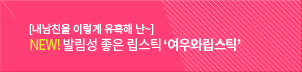
<style>
.page{position:relative;width:302px;height:72px;background:#ff3e75}
.page>*{position:absolute;margin:0}
.t1{font:11px "NotoSansCJKkr-Medium";letter-spacing:-0.05em;color:#ffffff}
.t2{font:14px "NotoSansCJKkr-Regular";letter-spacing:-0.05em;color:#ffffff;scale:0.95 1}
.t3{font:14px "NotoSansCJKkr-Regular";letter-spacing:-0.05em;color:#e3f42a;scale:0.95 1}
.t4{font:14px "NotoSansCJKkr-Bold";letter-spacing:-0.05em;color:#ffffff;scale:0.95 1}
</style>
<div class="page">
<p class="t1" style="left:29px;top:23px;width:125px;height:12px">[내남친을 이렇게 유혹해 난~]</p>
<p class="t2" style="left:30px;top:38px;width:211px;height:14px"><span class="t3">NEW! </span>발림성 좋은 립스틱 <span class="t4">‘여우와립스틱’</span></p>
</div>
